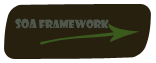
<style>
.page{position:relative;width:156px;height:63px;background:#28200f}
.page>*{position:absolute;margin:0}
.t1{font:11px "ShowcardGothic-Reg";color:#4f574c}
.t2{font:12px "ShowcardGothic-Reg";color:#4f574c}
</style>
<div class="page">
<p class="t1" style="left:15px;top:18px;width:94px;height:11px"><span class="t2">SOA </span>FramEwork</p>
</div>
